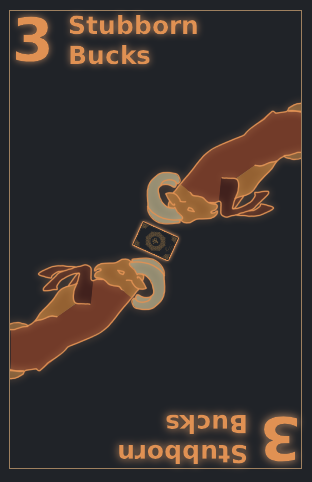
<style>
.page{position:relative;width:312px;height:482px;background:#202328}
.page>*{position:absolute;margin:0}
.t1{font:60px "DejaVuSans-Bold";color:#e09153}
.t2{font:25px "DejaVuSans-Bold";color:#e09153}
</style>
<div class="page">
<p class="t1" style="left:16px;top:16px;width:33px;height:46px">3</p>
<p class="t2" style="left:69px;top:15px;width:128px;height:50px">Stubborn<br>Bucks</p>
<p class="t2" style="left:119px;top:414px;width:128px;height:50px;rotate:180deg">Stubborn<br>Bucks</p>
<p class="t1" style="left:264px;top:416px;width:33px;height:46px;rotate:180deg">3</p>
</div>
